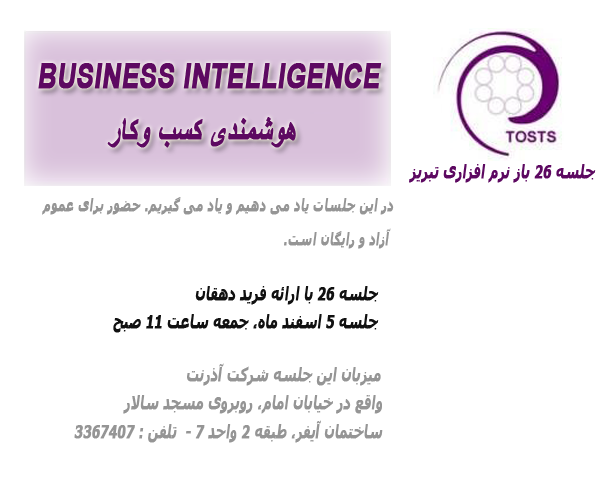
<style>
.page{position:relative;width:604px;height:485px;background:#ffffff}
.page>*{position:absolute;margin:0}
.t1{font:60.8px "Arial-BoldMT";letter-spacing:0.005em;color:#5d0961;text-transform:uppercase;font-weight:bold;font-style:italic;scale:0.72 1}
.t2{font:30.4px "Tahoma-Bold";letter-spacing:0.005em;color:#5d0961;text-transform:uppercase;font-weight:bold;font-style:italic;scale:0.72 1}
.t3{font:27.4px "Tahoma-Bold";letter-spacing:0.005em;color:#959595;text-transform:uppercase;font-weight:bold;font-style:italic;scale:0.72 1}
.t4{font:30.4px "Tahoma-Bold";letter-spacing:0.005em;color:#111111;text-transform:uppercase;font-weight:bold;font-style:italic;scale:0.72 1}
.t5{font:30.4px "Tahoma-Bold";letter-spacing:0.005em;color:#959595;text-transform:uppercase;font-weight:bold;font-style:italic;scale:0.72 1}
</style>
<div class="page">
<p class="t1" style="left:38px;top:63px;width:344px;height:26px">business intelligence</p>
<p class="t1" style="left:107px;top:117px;width:189px;height:31px">هوشمندی کسب وکار</p>
<p class="t2" style="left:409px;top:164px;width:187px;height:19px">جلسه 26 باز نرم افزاری تبریز</p>
<p class="t3" style="left:42px;top:197px;width:352px;height:18px">در این جلسات یاد می دهیم و یاد می گیریم. حضور برای عموم</p>
<p class="t3" style="left:284px;top:228px;width:107px;height:21px">آزاد و رایگان است.</p>
<p class="t4" style="left:195px;top:286px;width:184px;height:19px">جلسه 26 با ارائه فرید دهقان</p>
<p class="t4" style="left:113px;top:314px;width:266px;height:19px">جلسه 5 اسفند ماه، جمعه ساعت 11 صبح</p>
<p class="t5" style="left:187px;top:363px;width:194px;height:23px">میزبان این جلسه شرکت آذرنت</p>
<p class="t5" style="left:123px;top:395px;width:259px;height:19px">واقع در خیابان امام، روبروی مسجد سالار</p>
<p class="t5" style="left:74px;top:420px;width:309px;height:23px">ساختمان آیفر، طبقه 2 واحد 7 -  تلفن : 3367407</p>
</div>
